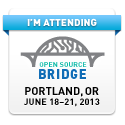
<style>
.page{position:relative;width:125px;height:125px;background:#ffffff}
.page>*{position:absolute;margin:0}
.t1{font:10px "DINPro-Black";color:#ffffff}
.t2{font:7px "DINPro-Bold";letter-spacing:0.02em;color:#08b9a6}
.t3{font:13px "DINPro-Black";letter-spacing:0.06em;color:#116db6}
.t4{font:13px "DINPro-Black";letter-spacing:0.02em;color:#116db6}
.t5{font:13px "DINPro-Black";letter-spacing:0.03em;color:#116db6}
.t6{font:9px/10px "DIN-Bold";letter-spacing:0.02em;color:#000000}
.t7{font:11px/10px "DIN-Bold";color:#000000}
</style>
<div class="page">
<p class="t1" style="left:27px;top:18px;width:70px;height:8px">I’M ATTENDING</p>
<p class="t2" style="left:39px;top:62px;width:48px;height:5px">OPEN SOURCE</p>
<p class="t3" style="left:39px;top:69px;width:47px;height:10px"><span class="t4">B</span>RI<span class="t5">D</span><span class="t4">GE</span></p>
<p class="t6" style="left:24px;top:87px;width:76px;height:20px;text-align:center"><span class="t7">PORTLAND, OR<br></span>JUNE 18–21, 2013</p>
</div>
